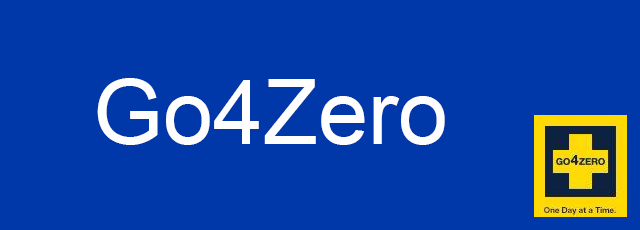
<style>
.page{position:relative;width:640px;height:230px;background:#0038a9}
.page>*{position:absolute;margin:0}
.t1{font:90px "ArialMT";color:#fefefe}
</style>
<div class="page">
<p class="t1" style="left:97px;top:78px;width:348px;height:67px">Go4Zero</p>
</div>
